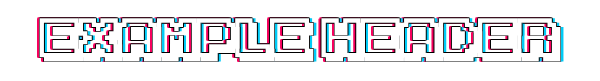
<style>
.page{position:relative;width:600px;height:81px;background:#ffffff}
.page>*{position:absolute;margin:0}
.t1{font:44.5px "KarmaticArcade";color:#ffffff}
</style>
<div class="page">
<p class="t1" style="left:39px;top:18px;width:522px;height:44px">Example Header</p>
</div>
